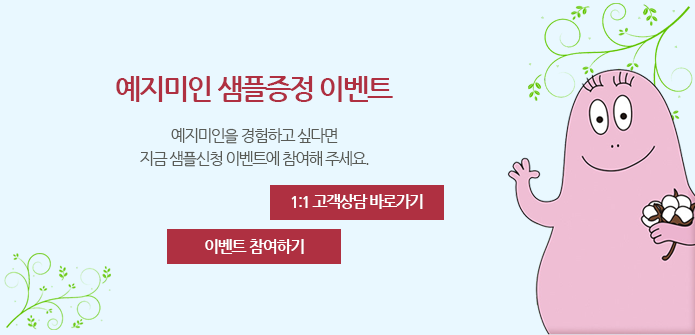
<style>
.page{position:relative;width:695px;height:335px;background:#e9f8ff}
.page>*{position:absolute;margin:0}
.t1{font:28px "NanumGothicBold";letter-spacing:-0.08em;color:#af3041}
.t2{font:15.5px/23px "NanumGothic";letter-spacing:-0.08em;color:#595b56}
</style>
<div class="page">
<p class="t1" style="left:116px;top:76px;width:277px;height:26px">예지미인 샘플증정 이벤트</p>
<p class="t2" style="left:140px;top:128px;width:229px;height:39px;text-align:center">예지미인을 경험하고 싶다면<br>지금 샘플신청 이벤트에 참여해 주세요.</p>
</div>
